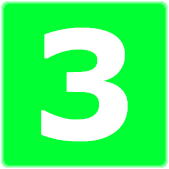
<style>
.page{position:relative;width:169px;height:169px;background:#00ff33}
.page>*{position:absolute;margin:0}
.t1{font:150px "Verdana-Bold";color:#ffffff;text-transform:uppercase}
</style>
<div class="page">
<p class="t1" style="left:41px;top:27px;width:87px;height:115px">3</p>
</div>
